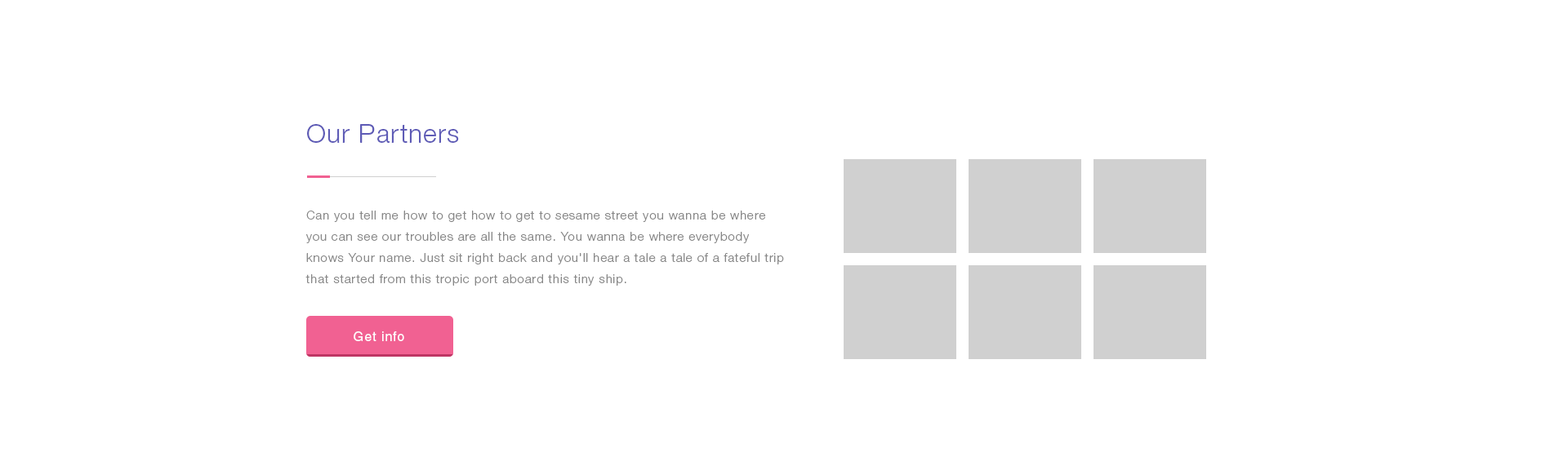
<style>
.page{position:relative;width:1568px;height:475px;background:#ffffff}
.page>*{position:absolute;margin:0}
.t1{font:26.1px "HelveticaNeueLTStd-Lt";letter-spacing:0.035em;color:#5e5bb6}
.t2{font:12.2px/21.2px "HelveticaNeueLTStd-Lt";letter-spacing:0.06em;color:#888888}
.t3{font:13.1px "Helvetica";letter-spacing:0.06em;color:#ffffff}
</style>
<div class="page">
<p class="t1" style="left:307px;top:124px;width:152px;height:19px">Our Partners</p>
<p class="t2" style="left:305px;top:211px;width:479px;height:75px">Can you tell me how to get how to get to sesame street you wanna be where you can see our troubles are all the same. You wanna be where everybody knows Your name. Just sit right back and you'll hear a tale a tale of a fateful trip that started from this tropic port aboard this tiny ship.</p>
<p class="t3" style="left:354px;top:332px;width:50px;height:9px">Get info</p>
</div>
